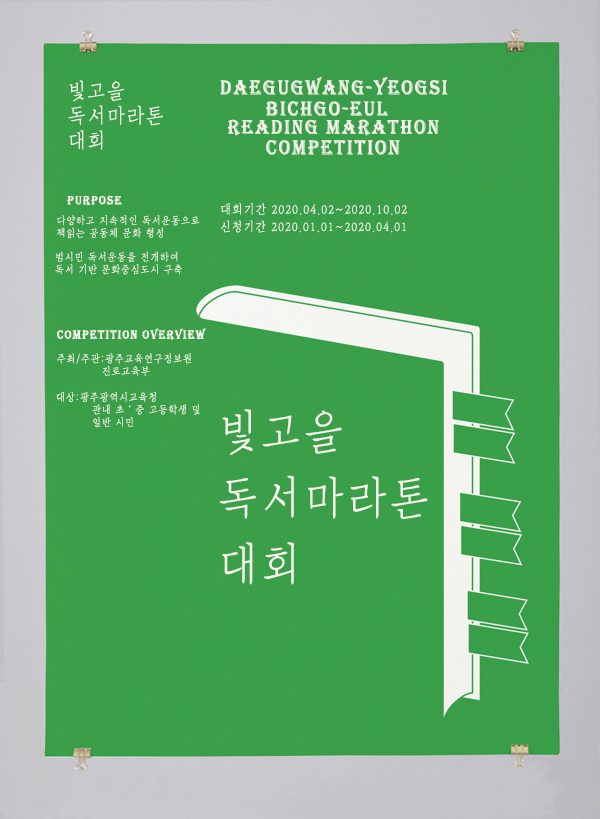
<style>
.page{position:relative;width:600px;height:819px;background:#399f49}
.page>*{position:absolute;margin:0}
.t1{font:20.8px "Algerian";letter-spacing:0.1em;color:#f5f5eb;text-transform:uppercase;scale:0.9 1}
.t2{font:20.8px/25px "DXPnM-KSCpc-EUC-H";letter-spacing:0.1em;color:#f5f5eb;text-transform:uppercase;scale:0.9 1}
.t3{font:12.5px "Algerian";letter-spacing:0.1em;color:#f5f5eb;text-transform:uppercase;scale:0.9 1}
.t4{font:12.5px "DXPnM-KSCpc-EUC-H";letter-spacing:0.1em;color:#f5f5eb;text-transform:uppercase;scale:0.9 1}
.t5{font:10.4px/12.5px "DXPnM-KSCpc-EUC-H";letter-spacing:0.1em;color:#f5f5eb;text-transform:uppercase;scale:0.9 1}
.t6{font:45.8px/66.7px "DXPnM-KSCpc-EUC-H";letter-spacing:0.1em;color:#f5f5eb;text-transform:uppercase;scale:0.9 1}
</style>
<div class="page">
<p class="t1" style="left:220px;top:76px;width:228px;height:19px">daegugwang-yeogsi</p>
<p class="t2" style="left:68px;top:80px;width:95px;height:70px">빛고을<br>독서마라톤<br>대회</p>
<p class="t1" style="left:266px;top:101px;width:122px;height:15px">bichgo-eul</p>
<p class="t1" style="left:227px;top:119px;width:212px;height:17px">Reading Marathon</p>
<p class="t1" style="left:266px;top:140px;width:134px;height:15px">Competition</p>
<p class="t3" style="left:67px;top:195px;width:55px;height:11px">purpose</p>
<p class="t4" style="left:221px;top:203px;width:186px;height:12px">대회기간 2020.04.02~2020.10.02</p>
<p class="t5" style="left:57px;top:215px;width:143px;height:24px">다양하고 지속적인 독서운동으로<br>책읽는 공동체 문화 형성</p>
<p class="t4" style="left:221px;top:220px;width:185px;height:13px">신청기간 2020.01.01~2020.04.01</p>
<p class="t5" style="left:55px;top:251px;width:127px;height:24px">범시민 독서운동을 전개하여<br>독서 기반 문화중심도시 구축</p>
<p class="t3" style="left:57px;top:328px;width:149px;height:12px">Competition Overview</p>
<p class="t5" style="left:57px;top:353px;width:135px;height:24px">주최/주관:광주교육연구정보원<br>            진로교육부</p>
<p class="t5" style="left:56px;top:392px;width:144px;height:36px">대상:광주광역시교육청 <br> 관내 초 ‘ 중 고등학생 및 <br> 일반 시민</p>
<p class="t6" style="left:219px;top:409px;width:209px;height:176px">빛고을<br>독서마라톤<br>대회</p>
</div>
